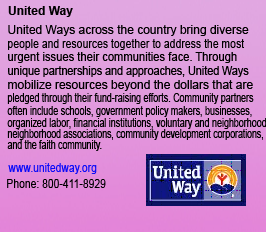
<style>
.page{position:relative;width:266px;height:232px}
.page>*{position:absolute;margin:0}
.t1{font:12px "Arial-BoldMT";color:#000000}
.t2{font:12px "ArialMT";color:#000000}
.t3{font:12px "ArialMT";color:#000000;scale:0.87 1}
.t4{font:12px "ArialMT";color:#000000;scale:0.93 1}
.t5{font:12px "ArialMT";color:#000000;scale:0.9 1}
.t6{font:12px "ArialMT";color:#000000;scale:0.74 1}
.t7{font:12px "ArialMT";color:#000000;scale:0.73 1}
.t8{font:12px "ArialMT";color:#0b0bf9;scale:0.86 1}
.t9{font:12px "ArialMT";color:#000000;scale:0.86 1}
</style>
<div class="page">
<p class="t1" style="left:8px;top:6px;width:65px;height:11px">United Way</p>
<p class="t2" style="left:8px;top:25px;width:241px;height:11px">United Ways across the country bring diverse</p>
<p class="t3" style="left:8px;top:39px;width:236px;height:11px">people and resources together to address the most</p>
<p class="t4" style="left:8px;top:52px;width:229px;height:11px">urgent issues their communities face. Through</p>
<p class="t5" style="left:8px;top:66px;width:241px;height:11px">unique partnerships and approaches, United Ways</p>
<p class="t2" style="left:8px;top:80px;width:245px;height:11px">mobilize resources beyond the dollars that are</p>
<p class="t6" style="left:7px;top:93px;width:247px;height:11px">pledged through their fund-raising efforts. Community partners</p>
<p class="t6" style="left:7px;top:106px;width:245px;height:11px">often include schools, government policy makers, businesses,</p>
<p class="t6" style="left:7px;top:118px;width:260px;height:11px">organized labor, financial institutions, voluntary and neighborhood</p>
<p class="t7" style="left:7px;top:129px;width:256px;height:11px">neighborhood associations, community development corporations,</p>
<p class="t7" style="left:7px;top:140px;width:95px;height:11px">and the faith community.</p>
<p class="t8" style="left:8px;top:163px;width:89px;height:11px">www.unitedway.org</p>
<p class="t9" style="left:7px;top:179px;width:99px;height:9px">Phone: 800-411-8929</p>
</div>
